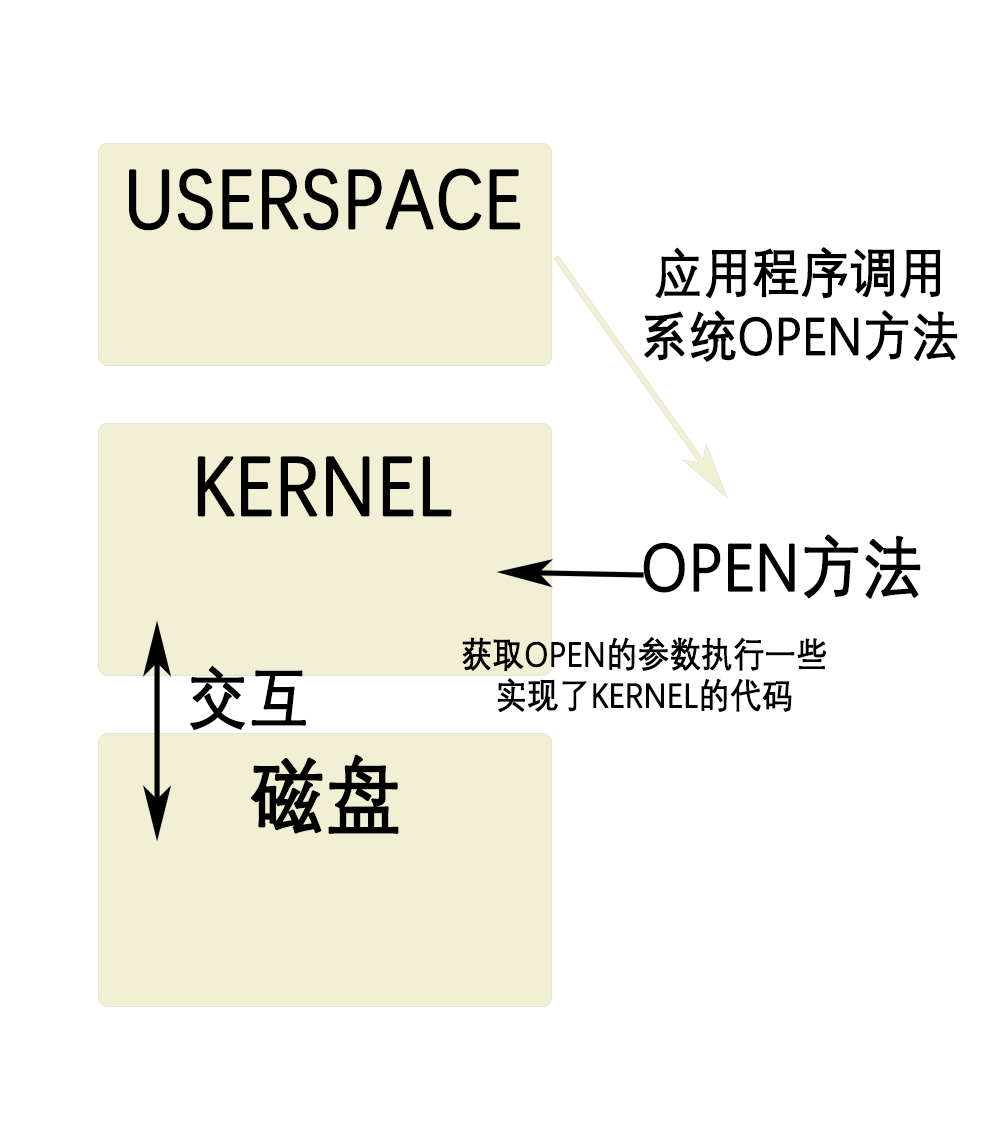
<style>
.page{position:relative;width:983px;height:1133px;background:#ffffff}
.page>*{position:absolute;margin:0}
.t1{font:84px "DengXian";color:#000000;text-transform:uppercase;font-weight:bold;scale:0.89 1}
.t2{font:53px/63.1px "DengXian";color:#000000;text-transform:uppercase;font-weight:bold;scale:0.89 1}
.t3{font:67.4px "DengXian";color:#000000;text-transform:uppercase;font-weight:bold;scale:0.89 1}
.t4{font:34.6px/41.1px "DengXian";color:#000000;text-transform:uppercase;font-weight:bold;scale:0.89 1}
.t5{font:67px "DengXian";color:#000000;text-transform:uppercase;font-weight:bold;scale:0.89 1}
</style>
<div class="page">
<p class="t1" style="left:129px;top:168px;width:392px;height:63px">userspace</p>
<p class="t2" style="left:644px;top:247px;width:314px;height:115px;text-align:center">应用程序调用<br>系统open方法</p>
<p class="t1" style="left:197px;top:456px;width:255px;height:61px">kernel</p>
<p class="t3" style="left:643px;top:534px;width:278px;height:65px">open方法</p>
<p class="t4" style="left:462px;top:636px;width:365px;height:77px;text-align:center">获取open的参数执行一些<br>实现了kernel的代码</p>
<p class="t5" style="left:190px;top:665px;width:116px;height:66px">交互</p>
<p class="t1" style="left:250px;top:754px;width:149px;height:80px">磁盘</p>
</div>
